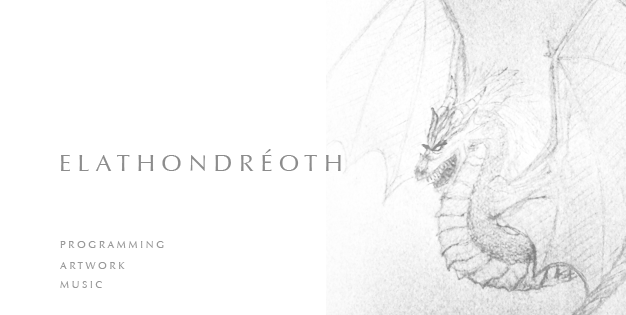
<style>
.page{position:relative;width:626px;height:315px;background:#ffffff}
.page>*{position:absolute;margin:0}
.t1{font:24px "Optima-Regular";color:#8c8c8c}
.t2{font:10px "Optima-Regular";color:#999999}
</style>
<div class="page">
<p class="t1" style="left:61px;top:149px;width:280px;height:22px">E L A T H O N D R É O T H</p>
<p class="t2" style="left:60px;top:241px;width:104px;height:7px">P R O G R A M M I N G</p>
<p class="t2" style="left:60px;top:262px;width:65px;height:7px">A R T W O R K</p>
<p class="t2" style="left:60px;top:281px;width:42px;height:7px">M U S I C</p>
</div>
